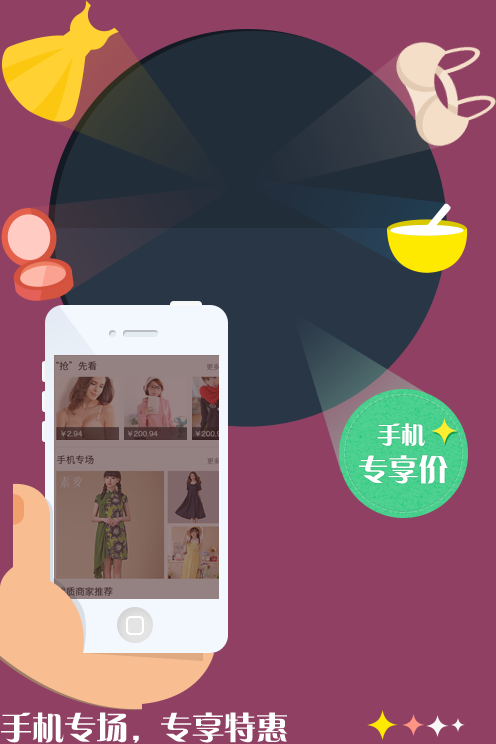
<style>
.page{position:relative;width:496px;height:744px;background:#904163}
.page>*{position:absolute;margin:0}
.t1{font:24px "FZCQJW--GB1-0";color:#ffffff}
.t2{font:30px "FZCQJW--GB1-0";color:#ffffff}
.t3{font:32px "FZCQJW--GB1-0";color:#ffffff}
</style>
<div class="page">
<p class="t1" style="left:377px;top:423px;width:48px;height:23px">手机</p>
<p class="t2" style="left:359px;top:455px;width:89px;height:29px">专享价</p>
<p class="t3" style="left:1px;top:712px;width:287px;height:31px">手机专场，专享特惠</p>
</div>
